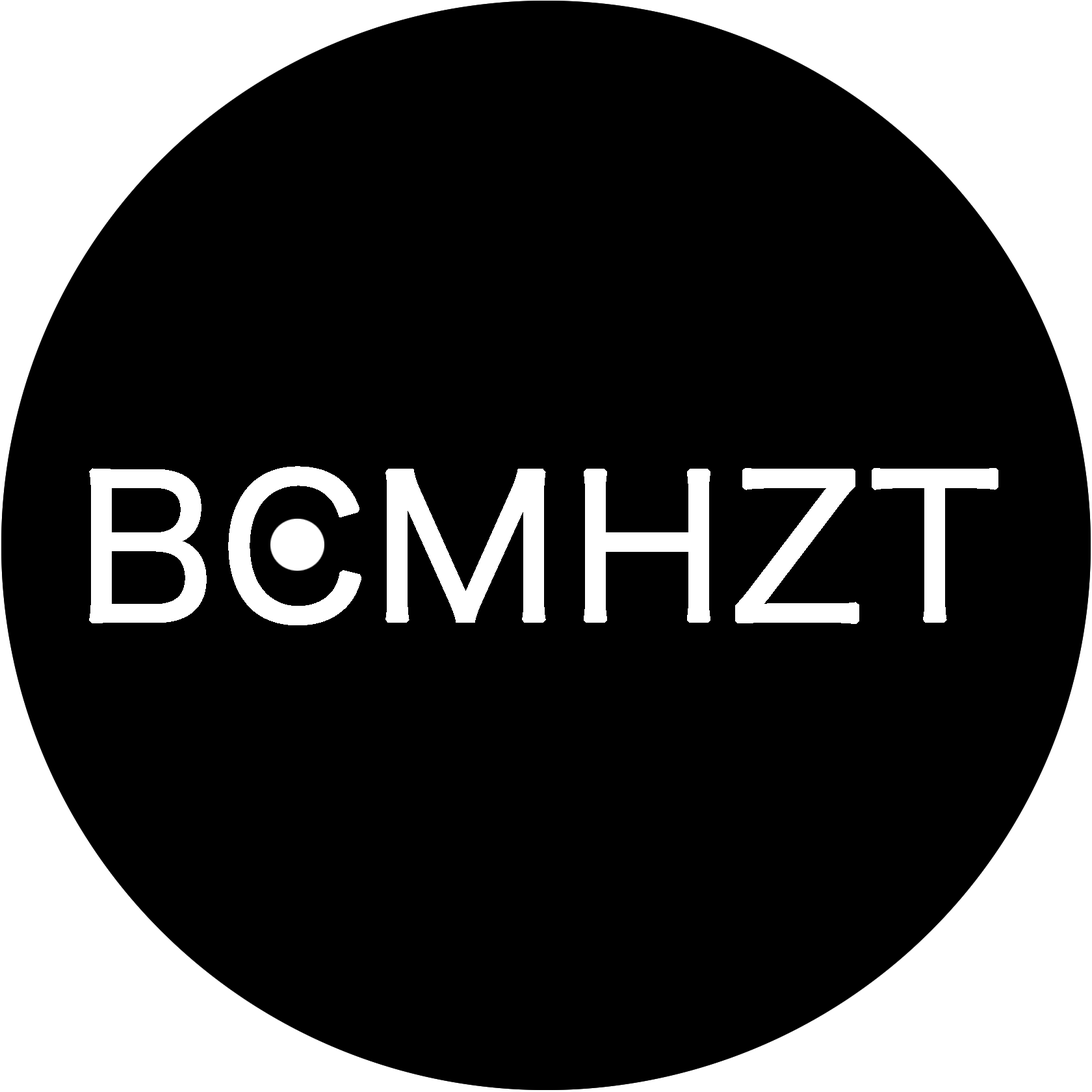
<style>
.page{position:relative;width:1092px;height:1092px;background:#000000}
.page>*{position:absolute;margin:0}
.t1{font:195px "HiraKakuPro-W3";letter-spacing:0.02em;color:#ffffff;font-weight:bold}
</style>
<div class="page">
<p class="t1" style="left:89px;top:466px;width:909px;height:159px">BCMHZT</p>
</div>
